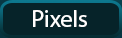
<style>
.page{position:relative;width:122px;height:38px;background:#062329}
.page>*{position:absolute;margin:0}
.t1{font:24px "MyriadHebrew-Regular";color:#ffffff}
</style>
<div class="page">
<p class="t1" style="left:33px;top:10px;width:54px;height:17px">Pixels</p>
<p class="t1" style="left:33px;top:10px;width:54px;height:17px">Pixels</p>
</div>
